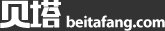
<style>
.page{position:relative;width:165px;height:31px;background:#333333}
.page>*{position:absolute;margin:0}
.t1{font:16.2px "MyriadPro-Bold";letter-spacing:-0.025em;color:#ffffff}
</style>
<div class="page">
<p class="t1" style="left:66px;top:15px;width:99px;height:16px">beitafang.com</p>
</div>
